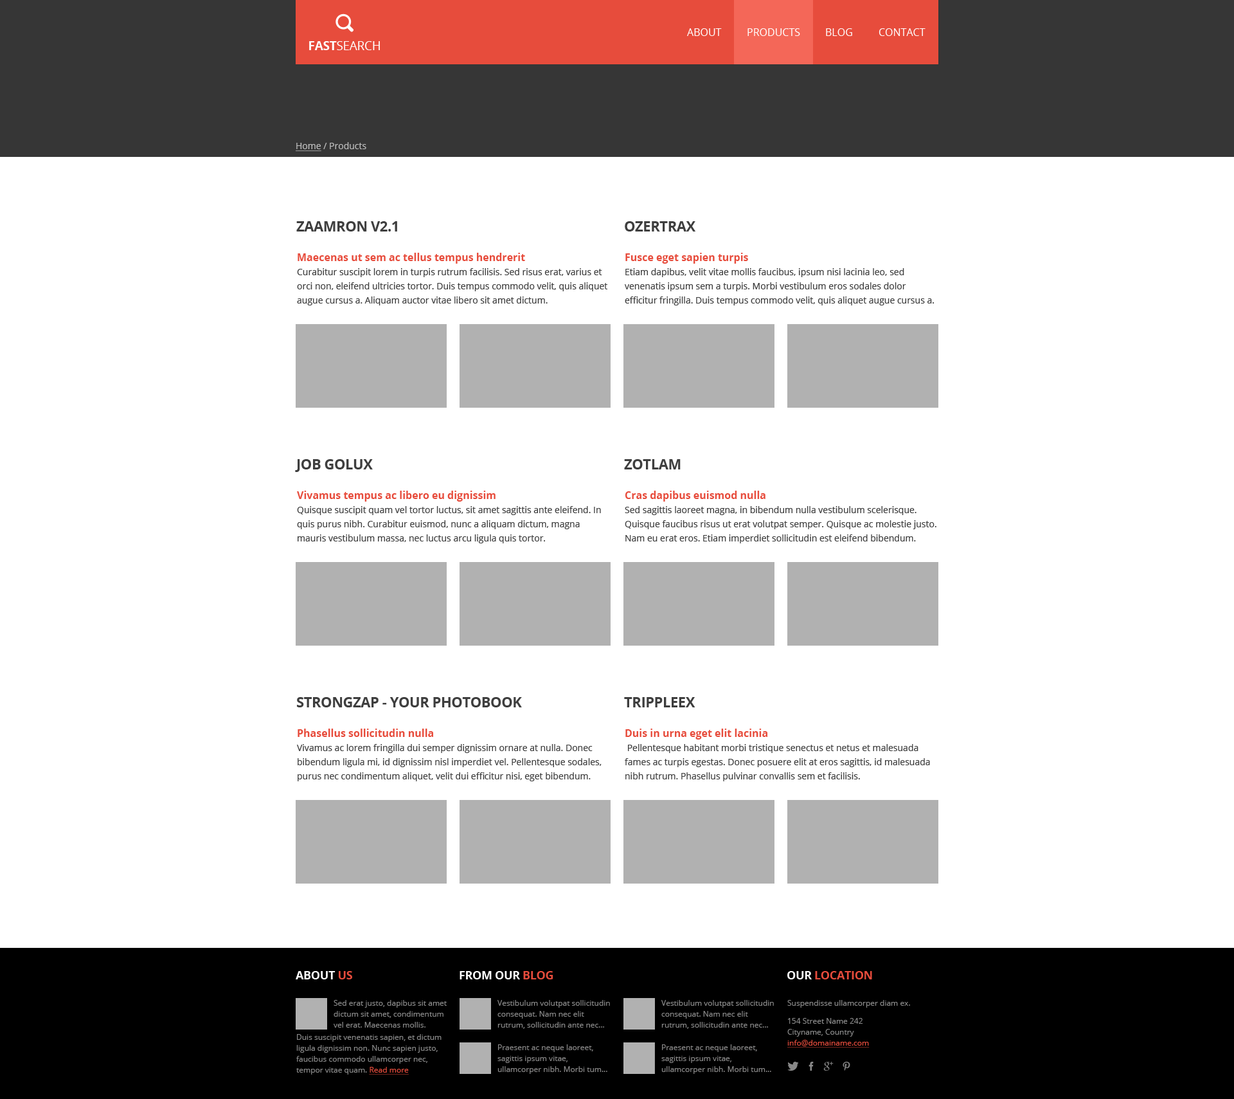
<style>
.page{position:relative;width:1234px;height:1099px;background:#ffffff}
.page>*{position:absolute;margin:0}
.t1{font:10.3px "OpenSans";color:#ffffff;text-transform:uppercase}
.t2{font:9px "OpenSans";color:#bfbfbf}
.t3{font:9px "OpenSans";color:#bfbfbf;text-decoration:underline}
.t4{font:14.1px "OpenSans-Bold";letter-spacing:-0.02em;color:#3e3e3e;text-transform:uppercase}
.t5{font:9px/14.1px "OpenSans";color:#3e3e3e}
.t6{font:10.3px/14.1px "OpenSans-Bold";color:#e74c3c}
.t7{font:11.6px "OpenSans-Bold";letter-spacing:-0.02em;color:#ffffff;text-transform:uppercase}
.t8{font:11.6px "OpenSans-Bold";letter-spacing:-0.02em;color:#e74c3c;text-transform:uppercase}
.t9{font:7.7px/10.9px "OpenSans";color:#8a8a8a}
.t10{font:7.7px/18px "OpenSans";color:#8a8a8a}
.t11{font:7.7px/10.9px "OpenSans";color:#e74c3c;text-decoration:underline}
.t12{font:7.7px/10.9px "OpenSans";color:#8a8989}
</style>
<div class="page">
<p class="t1" style="left:687px;top:28px;width:35px;height:8px">About</p>
<p class="t1" style="left:748px;top:28px;width:52px;height:8px">products</p>
<p class="t1" style="left:826px;top:28px;width:26px;height:8px">blog</p>
<p class="t1" style="left:879px;top:28px;width:47px;height:8px">Contact</p>
<p class="t2" style="left:296px;top:142px;width:70px;height:9px"><span class="t3">Home</span> / Products</p>
<p class="t4" style="left:296px;top:221px;width:101px;height:10px">Zaamron v2.1</p>
<p class="t4" style="left:625px;top:221px;width:71px;height:10px">Ozertrax</p>
<p class="t5" style="left:297px;top:253px;width:311px;height:52px"><span class="t6">Maecenas ut sem ac tellus tempus hendrerit<br></span>Curabitur suscipit lorem in turpis rutrum facilisis. Sed risus erat, varius et orci non, eleifend ultricies tortor. Duis tempus commodo velit, quis aliquet augue cursus a. Aliquam auctor vitae libero sit amet dictum.</p>
<p class="t5" style="left:625px;top:253px;width:309px;height:52px"><span class="t6">Fusce eget sapien turpis<br></span>Etiam dapibus, velit vitae mollis faucibus, ipsum nisi lacinia leo, sed venenatis ipsum sem a turpis. Morbi vestibulum eros sodales dolor efficitur fringilla. Duis tempus commodo velit, quis aliquet augue cursus a. Aliquam auctor vitae libero sit amet dictum. Etiam a interdum metus.</p>
<p class="t4" style="left:295px;top:459px;width:78px;height:13px">Job Golux</p>
<p class="t4" style="left:624px;top:459px;width:57px;height:10px">Zotlam</p>
<p class="t5" style="left:297px;top:491px;width:304px;height:52px"><span class="t6">Vivamus tempus ac libero eu dignissim<br></span>Quisque suscipit quam vel tortor luctus, sit amet sagittis ante eleifend. In quis purus nibh. Curabitur euismod, nunc a aliquam dictum, magna mauris vestibulum massa, nec luctus arcu ligula quis tortor.</p>
<p class="t5" style="left:625px;top:491px;width:312px;height:52px"><span class="t6">Cras dapibus euismod nulla<br></span>Sed sagittis laoreet magna, in bibendum nulla vestibulum scelerisque. Quisque faucibus risus ut erat volutpat semper. Quisque ac molestie justo. Nam eu erat eros. Etiam imperdiet sollicitudin est eleifend bibendum.</p>
<p class="t4" style="left:297px;top:697px;width:225px;height:10px">Strongzap - your photobook</p>
<p class="t4" style="left:624px;top:697px;width:72px;height:10px">Trippleex</p>
<p class="t5" style="left:297px;top:728px;width:305px;height:53px"><span class="t6">Phasellus sollicitudin nulla<br></span>Vivamus ac lorem fringilla dui semper dignissim ornare at nulla. Donec bibendum ligula mi, id dignissim nisl imperdiet vel. Pellentesque sodales, purus nec condimentum aliquet, velit dui efficitur nisi, eget bibendum.</p>
<p class="t5" style="left:625px;top:728px;width:305px;height:53px"><span class="t6">Duis in urna eget elit lacinia<br></span> Pellentesque habitant morbi tristique senectus et netus et malesuada fames ac turpis egestas. Donec posuere elit at eros sagittis, id malesuada nibh rutrum. Phasellus pulvinar convallis sem et facilisis.</p>
<p class="t7" style="left:296px;top:971px;width:56px;height:8px">About <span class="t8">us</span></p>
<p class="t7" style="left:460px;top:971px;width:94px;height:8px">From our <span class="t8">blog</span></p>
<p class="t8" style="left:788px;top:971px;width:84px;height:8px"><span class="t7">our </span>Location</p>
<p class="t9" style="left:334px;top:1000px;width:113px;height:27px">Sed erat justo, dapibus sit amet dictum sit amet, condimentum vel erat. Maecenas mollis. tincidunt sollicitudin</p>
<p class="t9" style="left:498px;top:1000px;width:112px;height:29px">Vestibulum volutpat sollicitudin consequat. Nam nec elit rutrum, sollicitudin ante nec...</p>
<p class="t9" style="left:662px;top:1000px;width:112px;height:29px">Vestibulum volutpat sollicitudin consequat. Nam nec elit rutrum, sollicitudin ante nec...</p>
<p class="t9" style="left:788px;top:1000px;width:122px;height:47px">Suspendisse ullamcorper diam ex.<br><span class="t10">154 Street Name 242<br></span>Cityname, Country<br><span class="t11">info@domainame.com</span></p>
<p class="t9" style="left:296px;top:1034px;width:146px;height:40px">Duis suscipit venenatis sapien, et dictum ligula dignissim non. Nunc sapien justo, faucibus commodo ullamcorper nec, tempor vitae quam. <span class="t11">Read more</span></p>
<p class="t12" style="left:498px;top:1044px;width:110px;height:30px">Praesent ac neque laoreet, sagittis ipsum vitae, ullamcorper nibh. Morbi tum... orci li</p>
<p class="t12" style="left:662px;top:1044px;width:109px;height:30px">Praesent ac neque laoreet, sagittis ipsum vitae, ullamcorper nibh. Morbi tum... orci li</p>
</div>
